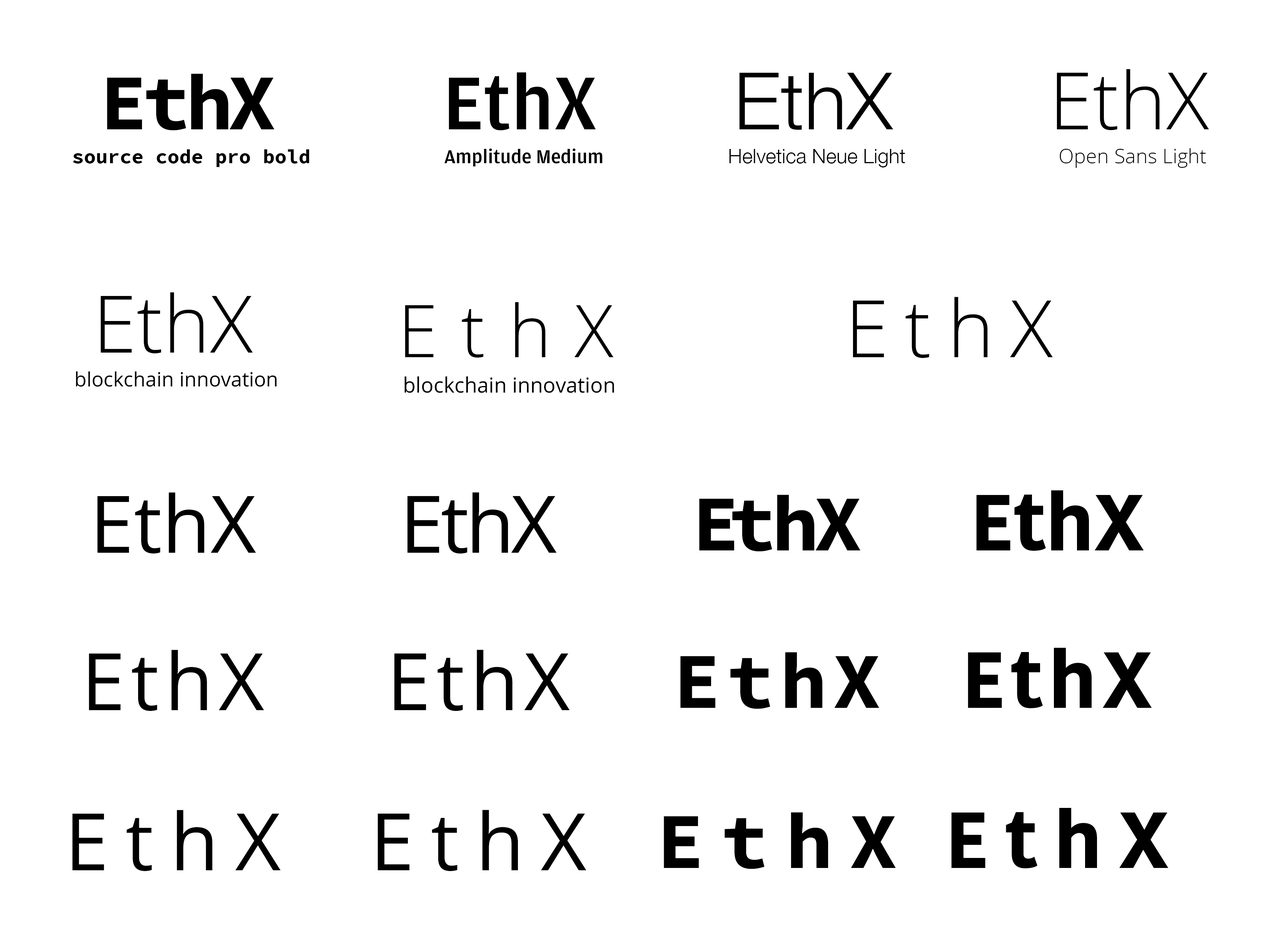
<style>
.page{position:relative;width:1279px;height:933px;background:#ffffff}
.page>*{position:absolute;margin:0}
.t1{font:79.2px "SourceCodePro-Bold";letter-spacing:-0.06em;color:#000000}
.t2{font:79.2px "Amplitude-Medium";color:#000000}
.t3{font:79.2px "HelveticaNeue-Light";color:#000000}
.t4{font:79.2px "OpenSans-Light";color:#000000}
.t5{font:20px "SourceCodePro-Bold";color:#000000}
.t6{font:20px "Amplitude-Medium";color:#000000}
.t7{font:20px "HelveticaNeue-Light";color:#000000}
.t8{font:20px "OpenSans-Light";color:#000000}
.t9{font:72.3px "OpenSans-Light";letter-spacing:0.32em;color:#000000}
.t10{font:79.2px "OpenSans-Light";letter-spacing:0.2em;color:#000000}
.t11{font:20px "OpenSans";color:#000000}
.t12{font:20.8px "OpenSans";color:#000000}
.t13{font:79.2px "OpenSans";color:#000000}
.t14{font:79.2px "OpenSans";letter-spacing:-0.04em;color:#000000}
.t15{font:79.2px "SourceCodePro-Bold";letter-spacing:-0.14em;color:#000000}
.t16{font:79.2px "KohinoorDevanagari-Bold";color:#000000}
.t17{font:79.2px "OpenSans";letter-spacing:0.07em;color:#000000}
.t18{font:79.2px "SourceCodePro-Bold";letter-spacing:0.07em;color:#000000}
.t19{font:79.2px "KohinoorDevanagari-Bold";letter-spacing:0.07em;color:#000000}
.t20{font:79.2px "OpenSans";letter-spacing:0.21em;color:#000000}
.t21{font:79.2px "KohinoorDevanagari-Bold";letter-spacing:0.21em;color:#000000}
.t22{font:79.2px "SourceCodePro-Bold";letter-spacing:0.21em;color:#000000}
</style>
<div class="page">
<p class="t1" style="left:107px;top:73px;width:167px;height:57px">EthX</p>
<p class="t2" style="left:449px;top:72px;width:147px;height:58px">EthX</p>
<p class="t3" style="left:739px;top:73px;width:154px;height:57px">EthX</p>
<p class="t4" style="left:1056px;top:69px;width:153px;height:61px">EthX</p>
<p class="t5" style="left:73px;top:149px;width:236px;height:18px">source code pro bold</p>
<p class="t6" style="left:444px;top:148px;width:158px;height:19px">Amplitude Medium</p>
<p class="t7" style="left:729px;top:149px;width:176px;height:18px">Helvetica Neue Light</p>
<p class="t8" style="left:1059px;top:148px;width:147px;height:20px">Open Sans Light</p>
<p class="t4" style="left:100px;top:292px;width:153px;height:62px">EthX</p>
<p class="t9" style="left:405px;top:302px;width:209px;height:55px">EthX</p>
<p class="t10" style="left:852px;top:297px;width:201px;height:61px">EthX</p>
<p class="t11" style="left:76px;top:371px;width:201px;height:16px">blockchain innovation</p>
<p class="t12" style="left:404px;top:376px;width:210px;height:17px">blockchain innovation</p>
<p class="t13" style="left:97px;top:492px;width:159px;height:62px">EthX</p>
<p class="t14" style="left:407px;top:492px;width:150px;height:61px">EthX</p>
<p class="t1" style="left:699px;top:494px;width:161px;height:57px"><span class="t15">E</span>thX</p>
<p class="t16" style="left:976px;top:490px;width:168px;height:61px">EthX</p>
<p class="t17" style="left:89px;top:649px;width:175px;height:62px">EthX</p>
<p class="t17" style="left:394px;top:649px;width:176px;height:62px">EthX</p>
<p class="t18" style="left:680px;top:652px;width:199px;height:57px">EthX</p>
<p class="t19" style="left:968px;top:647px;width:184px;height:61px">EthX</p>
<p class="t20" style="left:72px;top:809px;width:209px;height:62px">EthX</p>
<p class="t20" style="left:377px;top:809px;width:209px;height:62px">EthX</p>
<p class="t21" style="left:951px;top:807px;width:217px;height:61px">EthX</p>
<p class="t22" style="left:664px;top:812px;width:232px;height:57px">EthX</p>
</div>
